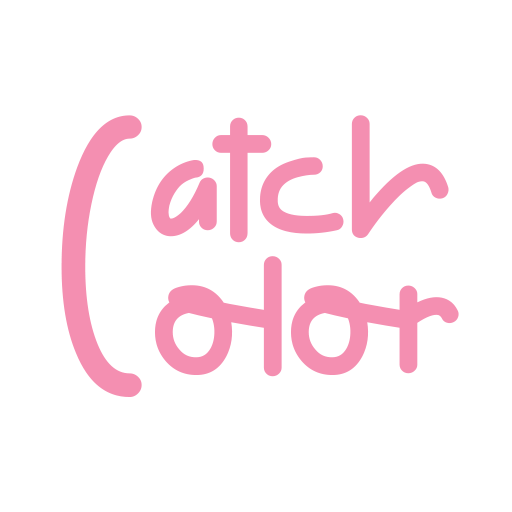
<style>
.page{position:relative;width:512px;height:512px;background:#ffffff}
.page>*{position:absolute;margin:0}
.t1{font:400px "FlyingBirdsRegular";color:#f48fb1}
.t2{font:300px "FlyingBirdsRegular";color:#f48fb1}
</style>
<div class="page">
<p class="t1" style="left:61px;top:115px;width:81px;height:282px">C</p>
<p class="t2" style="left:150px;top:115px;width:299px;height:128px">atch</p>
<p class="t2" style="left:155px;top:256px;width:304px;height:121px">olor</p>
</div>
